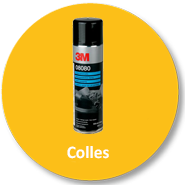
<style>
.page{position:relative;width:185px;height:185px;background:#fcbf18}
.page>*{position:absolute;margin:0}
.t1{font:17.8px "Calibri-Bold";color:#ffffff}
</style>
<div class="page">
<p class="t1" style="left:67px;top:146px;width:42px;height:13px">Colles</p>
</div>
